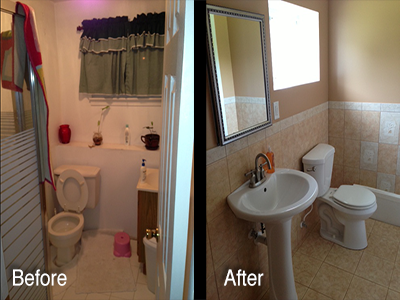
<style>
.page{position:relative;width:400px;height:300px}
.page>*{position:absolute;margin:0}
.t1{font:22px "Helvetica";color:#ffffff;scale:0.86 1}
</style>
<div class="page">
<p class="t1" style="left:13px;top:269px;width:54px;height:17px">Before</p>
<p class="t1" style="left:224px;top:269px;width:40px;height:17px">After</p>
</div>
